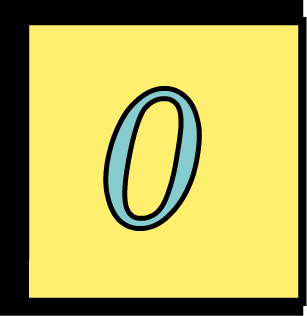
<style>
.page{position:relative;width:307px;height:316px;background:#ffef6e}
.page>*{position:absolute;margin:0}
.t1{font:208.3px "Garamond";color:#86cbce;font-style:italic}
</style>
<div class="page">
<p class="t1" style="left:108px;top:91px;width:89px;height:135px">0</p>
</div>
